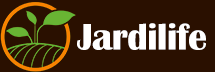
<style>
.page{position:relative;width:215px;height:72px;background:#2a1000}
.page>*{position:absolute;margin:0}
.t1{font:38.3px "BritannicBold";letter-spacing:-0.02em;color:#ffffff}
</style>
<div class="page">
<p class="t1" style="left:77px;top:23px;width:129px;height:27px">Jardilife</p>
</div>
